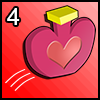
<style>
.page{position:relative;width:100px;height:100px}
.page>*{position:absolute;margin:0}
.t1{font:24px "ArialMT";color:#000000}
</style>
<div class="page">
<p class="t1" style="left:7px;top:8px;width:13px;height:17px">4</p>
</div>
